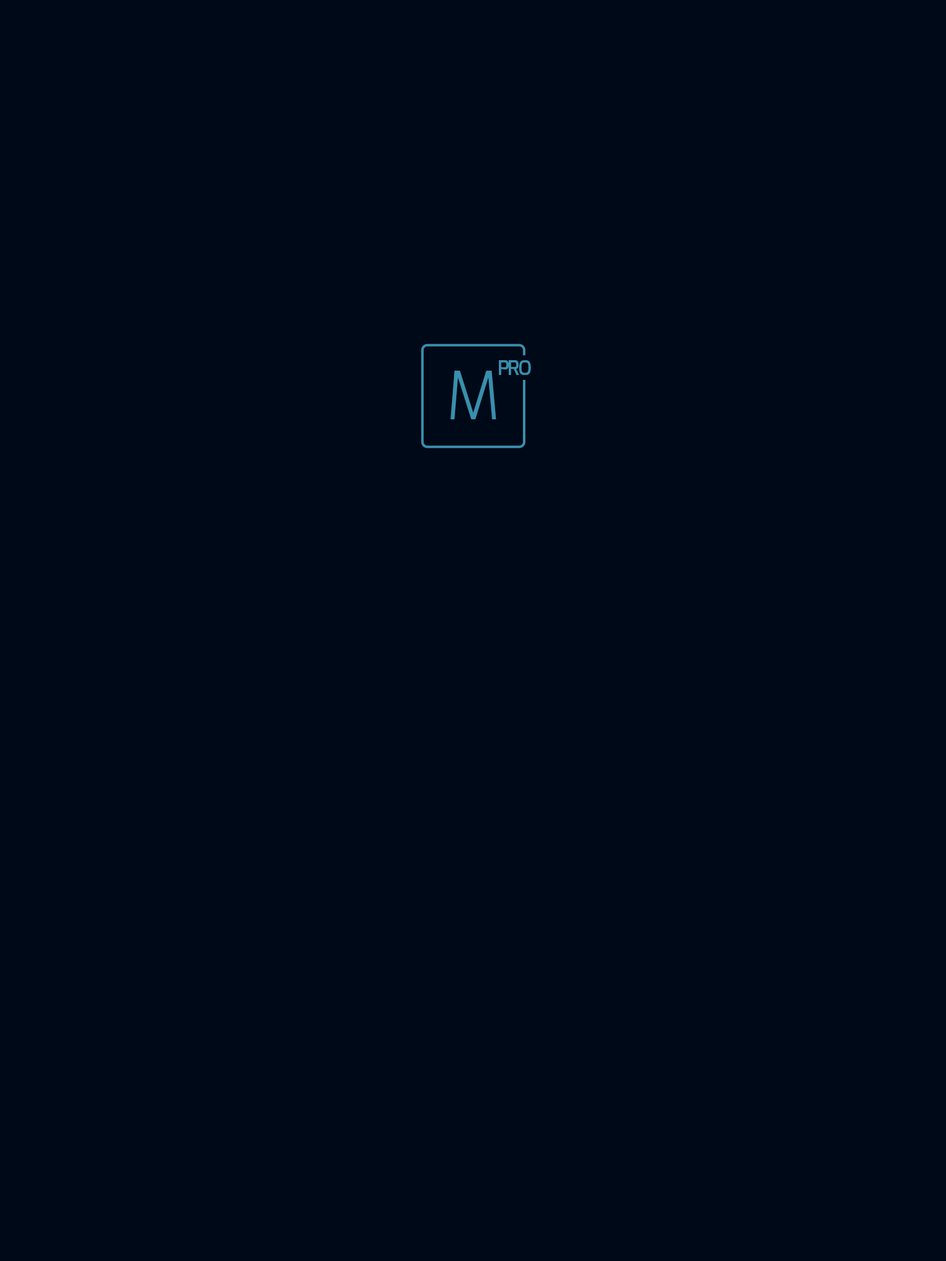
<style>
.page{position:relative;width:946px;height:1261px;background:#000918}
.page>*{position:absolute;margin:0}
.t1{font:19.8px "Exo-DemiBold";letter-spacing:-0.075em;color:#398fac}
.t2{font:66.6px "Exo-Light";letter-spacing:-0.04em;color:#398fac}
</style>
<div class="page">
<p class="t1" style="left:499px;top:360px;width:32px;height:15px">PRO</p>
<p class="t2" style="left:450px;top:371px;width:46px;height:48px">M</p>
</div>
